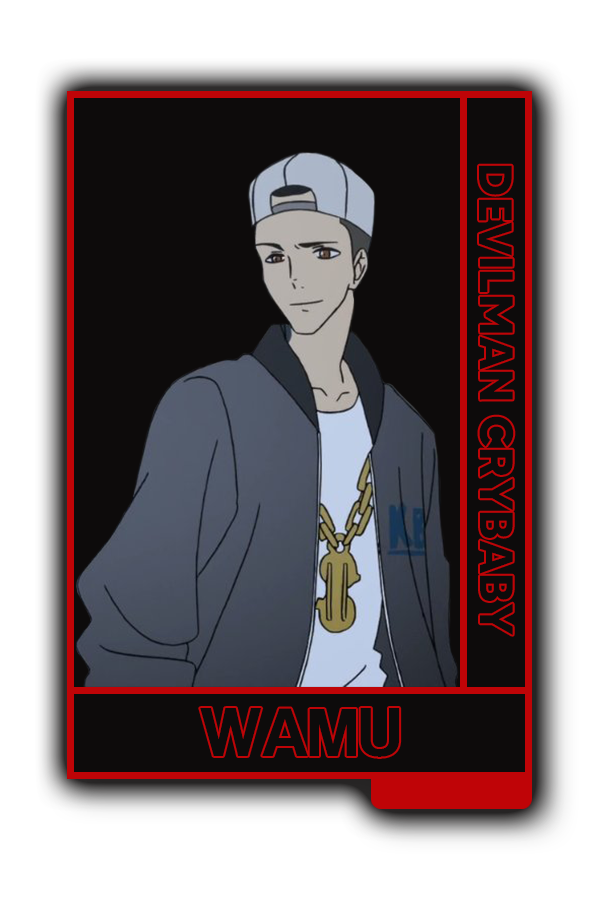
<style>
.page{position:relative;width:600px;height:900px;background:#0d0b0b}
.page>*{position:absolute;margin:0}
.t1{font:46.8px "MADETOMMY-Bold";color:#0d0b0b}
.t2{font:72.5px "CoolveticaRg-Regular";color:#0d0b0b}
</style>
<div class="page">
<p class="t1" style="left:479px;top:165px;width:35px;height:470px;rotate:90deg">DEVILMAN CRYBABY</p>
<p class="t2" style="left:200px;top:708px;width:200px;height:49px">WAMU</p>
</div>
